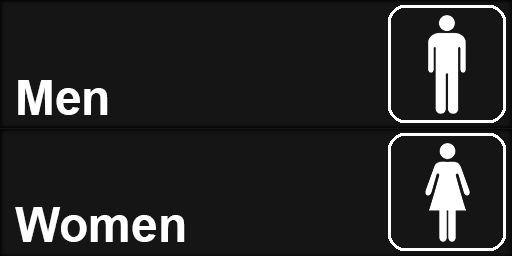
<style>
.page{position:relative;width:512px;height:256px;background:#151515}
.page>*{position:absolute;margin:0}
.t1{font:48px "Arial-BoldMT";color:#ffffff}
</style>
<div class="page">
<p class="t1" style="left:18px;top:80px;width:90px;height:35px">Men</p>
<p class="t1" style="left:15px;top:207px;width:170px;height:35px">Women</p>
</div>
